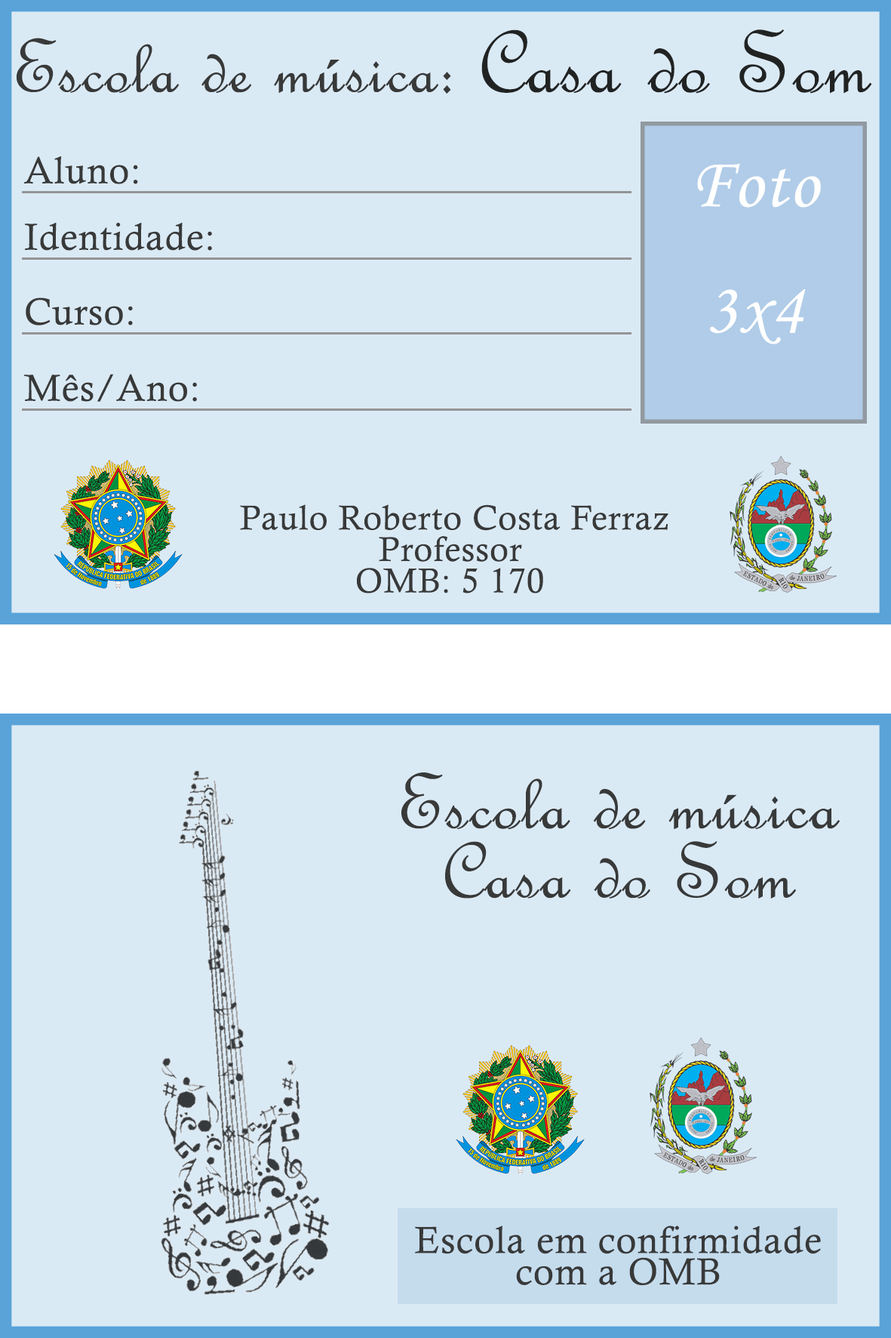
<style>
.page{position:relative;width:891px;height:1338px;background:#daeaf5}
.page>*{position:absolute;margin:0}
.t1{font:81.8px "FrenchScriptMT";letter-spacing:0.025em;color:#383939}
.t2{font:94.4px "FrenchScriptMT";letter-spacing:0.025em;color:#212323}
.t3{font:37.7px "CalistoMT";letter-spacing:0.025em;color:#383939}
.t4{font:72.3px/31.4px "MonotypeCorsiva";letter-spacing:0.025em;color:#ffffff}
.t5{font:34.6px/31.4px "CalistoMT";letter-spacing:0.025em;color:#383939}
.t6{font:84.9px/69.2px "FrenchScriptMT";letter-spacing:0.025em;color:#383939}
.t7{font:9.1px/31.4px "CalistoMT";letter-spacing:0.025em;color:#383939}
</style>
<div class="page">
<p class="t1" style="left:16px;top:29px;width:857px;height:65px">Escola de música: <span class="t2">Casa do Som</span></p>
<p class="t3" style="left:24px;top:156px;width:114px;height:28px">Aluno:</p>
<p class="t4" style="left:697px;top:163px;width:124px;height:181px;text-align:center">Foto <br><br><br><br>3x4</p>
<p class="t3" style="left:25px;top:222px;width:187px;height:29px">Identidade:</p>
<p class="t3" style="left:26px;top:297px;width:107px;height:28px">Curso:</p>
<p class="t3" style="left:24px;top:374px;width:173px;height:28px">Mês/Ano:</p>
<p class="t5" style="left:240px;top:504px;width:429px;height:89px;text-align:center">Paulo Roberto Costa Ferraz<br>Professor <br>OMB: 5 170</p>
<p class="t6" style="left:402px;top:772px;width:438px;height:126px;text-align:center">Escola de música <br>Casa do Som</p>
<p class="t7" style="left:415px;top:1225px;width:406px;height:60px;text-align:center">Escola em confirmidade<br>com a OMB</p>
</div>
